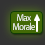
<style>
.page{position:relative;width:45px;height:45px}
.page>*{position:absolute;margin:0}
.t1{font:10px/9px "AdobeClean-Regular";letter-spacing:-0.08em;color:#ffffff;scale:0.9 1}
</style>
<div class="page">
<p class="t1" style="left:13px;top:14px;width:22px;height:16px;text-align:center">Max<br>Morale</p>
</div>
